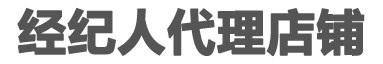
<style>
.page{position:relative;width:383px;height:64px;background:#ffffff}
.page>*{position:absolute;margin:0}
.t1{font:48px "MicrosoftYaHei-Bold";letter-spacing:0.01em;color:#555555;font-weight:bold}
</style>
<div class="page">
<p class="t1" style="left:17px;top:7px;width:348px;height:50px">经纪人代理店铺</p>
</div>
